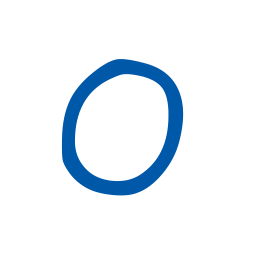
<style>
.page{position:relative;width:256px;height:256px;background:#ffffff}
.page>*{position:absolute;margin:0}
.t1{font:300px "xiascript_2015430";color:#0058a9}
</style>
<div class="page">
<p class="t1" style="left:61px;top:59px;width:123px;height:137px">O</p>
</div>
